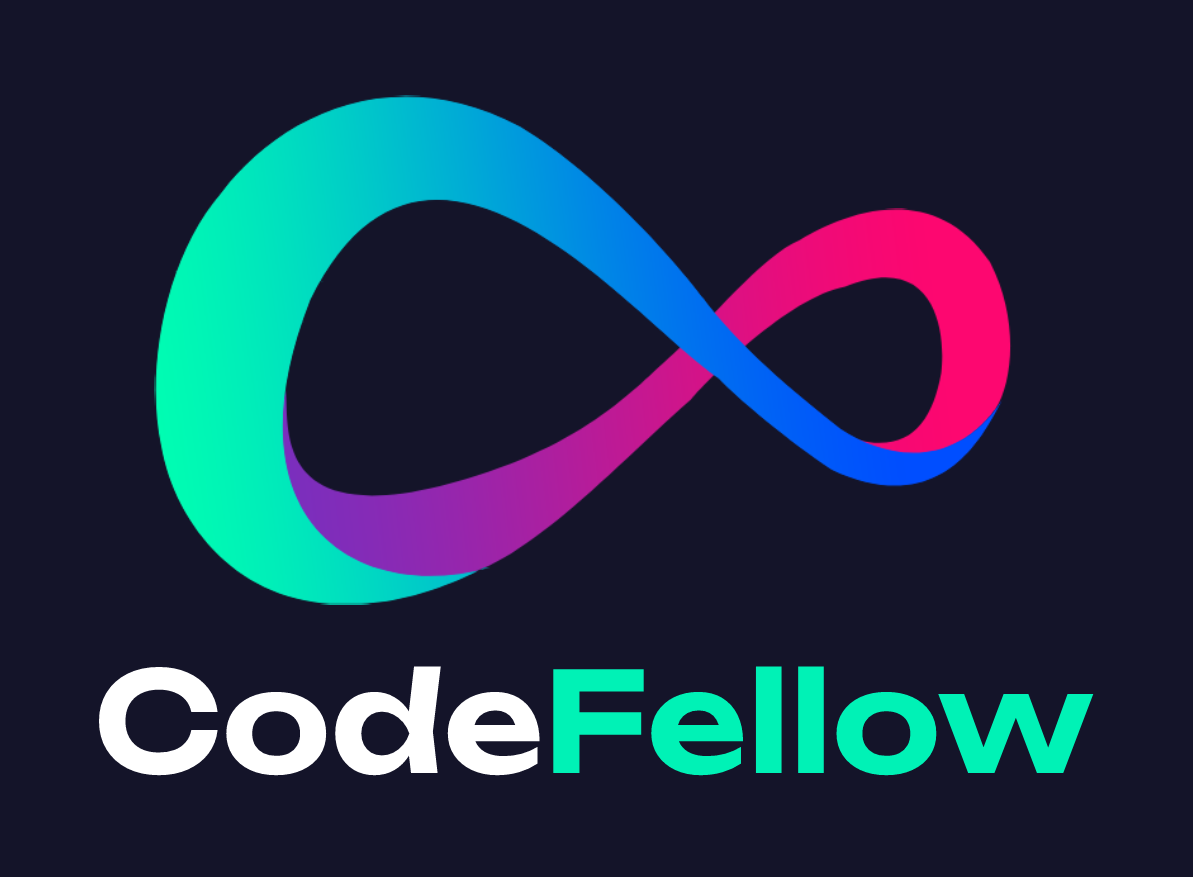
<style>
.page{position:relative;width:1193px;height:877px;background:#141429}
.page>*{position:absolute;margin:0}
.t1{font:138.4px "Unbounded-SemiBold";color:#00f2b6}
.t2{font:138.4px "Unbounded-SemiBold";color:#ffffff}
</style>
<div class="page">
<p class="t1" style="left:98px;top:666px;width:996px;height:110px"><span class="t2">Code</span>Fellow</p>
</div>
